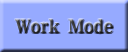
<style>
.page{position:relative;width:128px;height:52px;background:#96aaff}
.page>*{position:absolute;margin:0}
.t1{font:18px "MyungjoXB-HM"}
</style>
<div class="page">
<p class="t1" style="left:15px;top:19px;width:98px;height:15px">Work Mode</p>
</div>
